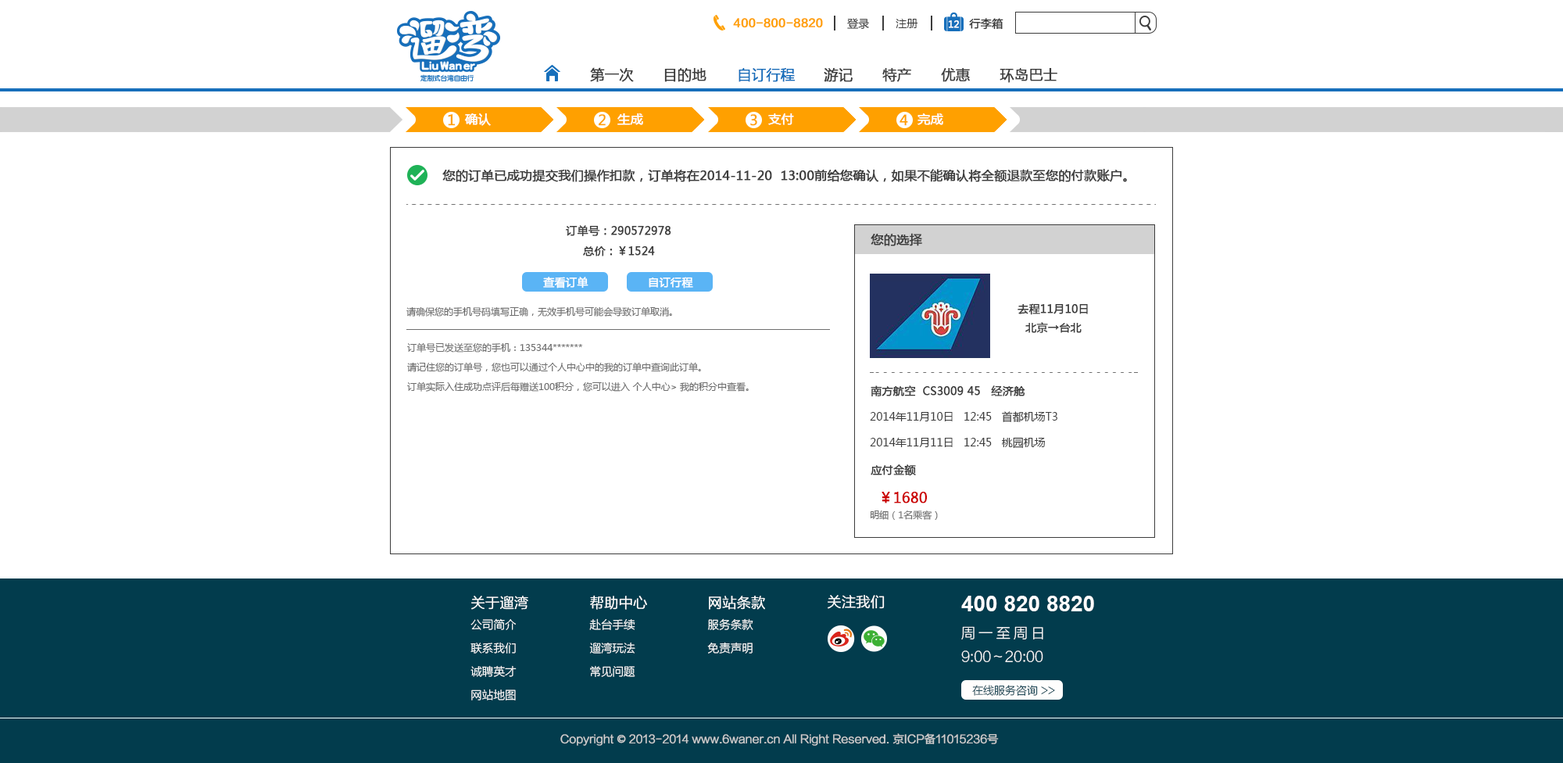
<style>
.page{position:relative;width:1563px;height:763px;background:#ffffff}
.page>*{position:absolute;margin:0}
.t1{font:10.9px "FZLTZHK--GBK1-0";color:#ffa000;font-weight:bold}
.t2{font:10.9px "MicrosoftYaHei";color:#3c3c3c}
.t3{font:10.9px "MicrosoftYaHei";color:#3c3c3c;font-weight:bold}
.t4{font:9.4px "MicrosoftYaHei";color:#fefefe;font-weight:bold}
.t5{font:14.1px "MicrosoftYaHei";color:#3c3c3c;font-weight:bold}
.t6{font:14.1px "MicrosoftYaHei";color:#176fbb;font-weight:bold}
.t7{font:12.5px "MicrosoftYaHei";color:#ffffff;font-weight:bold}
.t8{font:14px "MicrosoftYaHei";color:#ffa000;font-weight:bold}
.t9{font:12.5px "MicrosoftYaHei";color:#3c3c3c;font-weight:bold}
.t10{font:10.9px "MicrosoftYaHei";color:#ffffff;font-weight:bold}
.t11{font:10.9px/18.8px "MicrosoftYaHei";color:#3c3c3c;font-weight:bold}
.t12{font:9.4px "MicrosoftYaHei";color:#6e6e6e}
.t13{font:14.1px "MicrosoftYaHei";color:#cc0000;font-weight:bold}
.t14{font:11.4px/23.4px "FZLTXHK--GBK1-0";color:#ffffff}
.t15{font:14.1px/23.4px "FZLTXHK--GBK1-0";color:#ffffff;font-weight:bold}
.t16{font:14.1px "FZLTXHK--GBK1-0";color:#ffffff;font-weight:bold}
.t17{font:21.9px "Arial-BoldMT";color:#ffffff}
.t18{font:14.1px/23.4px "FZLTXHK--GBK1-0";color:#ffffff}
.t19{font:14.1px/23.4px "FZLTXHK--GBK1-0";letter-spacing:0.24em;color:#ffffff}
.t20{font:10.9px "FZLTXHK--GBK1-0"}
.t21{font:10.9px "FZLTXHK--GBK1-0";color:#d0d0d0;font-weight:bold}
.t22{font:10.9px "AdobeHeitiStd-Regular";color:#d0d0d0;font-weight:bold}
</style>
<div class="page">
<p class="t1" style="left:733px;top:18px;width:90px;height:10px">400-800-8820</p>
<p class="t2" style="left:847px;top:18px;width:22px;height:11px">登录</p>
<p class="t3" style="left:969px;top:18px;width:35px;height:12px">行李箱</p>
<p class="t2" style="left:896px;top:19px;width:22px;height:9px">注册</p>
<p class="t4" style="left:948px;top:20px;width:11px;height:8px">12</p>
<p class="t5" style="left:590px;top:67px;width:44px;height:15px">第一次</p>
<p class="t5" style="left:664px;top:68px;width:43px;height:14px">目的地</p>
<p class="t6" style="left:739px;top:68px;width:57px;height:14px">自订行程</p>
<p class="t5" style="left:824px;top:68px;width:29px;height:14px">游记</p>
<p class="t5" style="left:882px;top:68px;width:29px;height:14px">特产</p>
<p class="t5" style="left:941px;top:68px;width:29px;height:14px">优惠</p>
<p class="t5" style="left:1000px;top:68px;width:57px;height:15px">环岛巴士</p>
<p class="t7" style="left:464px;top:113px;width:27px;height:13px">确认</p>
<p class="t7" style="left:617px;top:113px;width:26px;height:12px">生成</p>
<p class="t7" style="left:768px;top:113px;width:26px;height:12px">支付</p>
<p class="t7" style="left:918px;top:113px;width:25px;height:12px">完成</p>
<p class="t8" style="left:448px;top:114px;width:7px;height:12px">1</p>
<p class="t8" style="left:599px;top:114px;width:7px;height:12px">2</p>
<p class="t8" style="left:750px;top:114px;width:7px;height:12px">3</p>
<p class="t8" style="left:900px;top:114px;width:8px;height:12px">4</p>
<p class="t9" style="left:442px;top:169px;width:685px;height:13px">您的订单已成功提交我们操作扣款，订单将在2014-11-20  13:00前给您确认，如果不能确认将全额退款至您的付款账户。</p>
<p class="t3" style="left:566px;top:225px;width:105px;height:12px">订单号：290572978</p>
<p class="t9" style="left:871px;top:233px;width:51px;height:13px">您的选择</p>
<p class="t3" style="left:583px;top:246px;width:72px;height:10px">总价：￥1524</p>
<p class="t10" style="left:543px;top:277px;width:46px;height:11px">查看订单</p>
<p class="t10" style="left:649px;top:277px;width:44px;height:11px">自订行程</p>
<p class="t11" style="left:1018px;top:303px;width:70px;height:30px;text-align:center">去程11月10日<br>北京→台北</p>
<p class="t12" style="left:406px;top:306px;width:266px;height:11px">请确保您的手机号码填写正确，无效手机号可能会导致订单取消。</p>
<p class="t12" style="left:407px;top:342px;width:175px;height:10px">订单号已发送至您的手机：135344*******</p>
<p class="t12" style="left:407px;top:362px;width:294px;height:10px">请记住您的订单号，您也可以通过个人中心中的我的订单中查询此订单。</p>
<p class="t12" style="left:407px;top:381px;width:342px;height:11px">订单实际入住成功点评后每赠送100积分，您可以进入 个人中心&gt; 我的积分中查看。</p>
<p class="t3" style="left:871px;top:385px;width:154px;height:12px">南方航空  CS3009 45   经济舱</p>
<p class="t2" style="left:870px;top:411px;width:187px;height:11px">2014年11月10日   12:45   首都机场T3</p>
<p class="t2" style="left:870px;top:437px;width:175px;height:12px">2014年11月11日   12:45   桃园机场</p>
<p class="t3" style="left:871px;top:464px;width:45px;height:12px">应付金额</p>
<p class="t13" style="left:882px;top:492px;width:45px;height:11px">￥1680</p>
<p class="t12" style="left:871px;top:510px;width:67px;height:10px">明细（1名乘客）</p>
<p class="t14" style="left:471px;top:596px;width:57px;height:104px"><span class="t15">关于遛湾<br></span>公司简介<br>联系我们<br>诚聘英才<br>网站地图</p>
<p class="t14" style="left:589px;top:595px;width:58px;height:82px"><span class="t15">帮助中心<br></span>赴台手续 <br>遛湾玩法 <br>常见问题</p>
<p class="t14" style="left:707px;top:596px;width:58px;height:57px"><span class="t15">网站条款 <br></span>服务条款<br>免责声明</p>
<p class="t16" style="left:828px;top:595px;width:57px;height:14px">关注我们</p>
<p class="t17" style="left:961px;top:596px;width:133px;height:15px">400 820 8820</p>
<p class="t18" style="left:961px;top:626px;width:82px;height:36px"><span class="t19">周一至周日<br></span>9:00～20:00</p>
<p class="t20" style="left:972px;top:685px;width:83px;height:11px">在线服务咨询 &gt;&gt;</p>
<p class="t21" style="left:560px;top:733px;width:439px;height:13px">Copyright <span class="t22">©</span> 2013-2014 www.6waner.cn All Right Reserved. 京ICP备11015236号</p>
</div>
